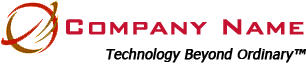
<style>
.page{position:relative;width:306px;height:68px;background:#ffffff}
.page>*{position:absolute;margin:0}
.t1{font:28.6px "BankGothicBold";letter-spacing:0.002em;color:#c41230;font-weight:bold}
.t2{font:13.9px "Tahoma";letter-spacing:0.002em;color:#000000;font-weight:bold;font-style:italic}
</style>
<div class="page">
<p class="t1" style="left:66px;top:19px;width:238px;height:16px">Company Name</p>
<p class="t2" style="left:106px;top:48px;width:200px;height:15px">Technology Beyond Ordinary™</p>
</div>
